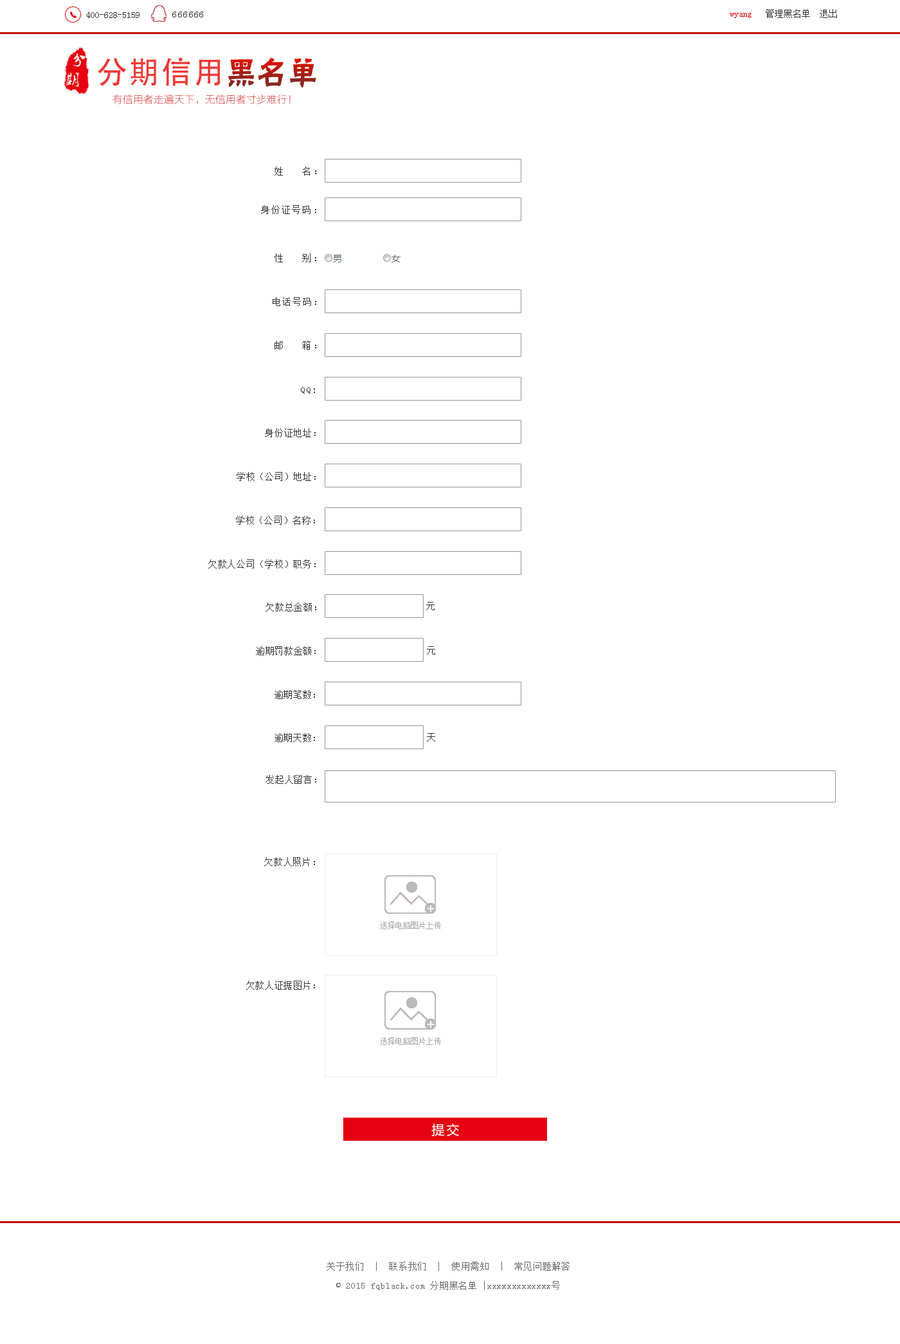
<style>
.page{position:relative;width:900px;height:1344px;background:#ffffff}
.page>*{position:absolute;margin:0}
.t1{font:9px "SimSun";color:#333333}
.t2{font:9px "SimSun";color:#333333;font-weight:bold}
.t3{font:9px "SimSun";letter-spacing:0.1em;color:#333333}
.t4{font:9px "SimSun";color:#d90000}
.t5{font:30.9px "AdobeHeitiStd-Regular";letter-spacing:0.05em;color:#ef3936}
.t6{font:10.3px "FZLTCXHJW--GB1-0";color:#d90000}
.t7{font:9px "SimSun";letter-spacing:0.15em;color:#333333}
.t8{font:9px "SimSun";letter-spacing:0.05em;color:#333333}
.t9{font:12.9px "MicrosoftYaHei";letter-spacing:0.15em;color:#ffffff}
.t10{font:9px/19.3px "SimSun";letter-spacing:0.05em;color:#666666}
</style>
<div class="page">
<p class="t1" style="left:86px;top:12px;width:54px;height:6px"><span class="t2">     </span>400-628-5159</p>
<p class="t3" style="left:172px;top:12px;width:31px;height:5px">666666</p>
<p class="t1" style="left:730px;top:9px;width:107px;height:9px"><span class="t4">wyang   </span>管理黑名单  退出</p>
<p class="t5" style="left:98px;top:57px;width:123px;height:29px">分期信用</p>
<p class="t6" style="left:113px;top:94px;width:178px;height:10px">有信用者走遍天下，无信用者寸步难行！</p>
<p class="t7" style="left:274px;top:166px;width:42px;height:10px">姓   名：</p>
<p class="t7" style="left:261px;top:205px;width:55px;height:9px">身份证号码：</p>
<p class="t7" style="left:274px;top:253px;width:42px;height:9px">性   别：</p>
<p class="t7" style="left:273px;top:297px;width:43px;height:9px">电话号码：</p>
<p class="t7" style="left:274px;top:341px;width:42px;height:9px">邮   箱：</p>
<p class="t7" style="left:301px;top:387px;width:14px;height:6px">QQ:</p>
<p class="t8" style="left:265px;top:428px;width:51px;height:9px">身份证地址：</p>
<p class="t8" style="left:237px;top:472px;width:79px;height:9px">学校（公司）地址：</p>
<p class="t8" style="left:236px;top:516px;width:79px;height:9px">学校（公司）名称：</p>
<p class="t8" style="left:208px;top:559px;width:108px;height:9px">欠款人公司（学校）职务：</p>
<p class="t8" style="left:266px;top:602px;width:50px;height:9px">欠款总金额：</p>
<p class="t8" style="left:426px;top:602px;width:9px;height:8px">元</p>
<p class="t8" style="left:256px;top:646px;width:60px;height:9px">逾期罚款金额：</p>
<p class="t8" style="left:427px;top:646px;width:8px;height:8px">元</p>
<p class="t8" style="left:274px;top:690px;width:41px;height:9px">逾期笔数：</p>
<p class="t8" style="left:274px;top:733px;width:41px;height:9px">逾期天数：</p>
<p class="t8" style="left:427px;top:733px;width:8px;height:8px">天</p>
<p class="t8" style="left:266px;top:775px;width:50px;height:9px">发起人留言：</p>
<p class="t8" style="left:264px;top:857px;width:51px;height:9px">欠款人照片：</p>
<p class="t8" style="left:246px;top:980px;width:69px;height:9px">欠款人证据图片：</p>
<p class="t9" style="left:431px;top:1123px;width:28px;height:13px">提交</p>
<p class="t10" style="left:327px;top:1261px;width:243px;height:29px;text-align:center">关于我们  |  联系我们  |  使用需知  |  常见问题解答<br>© 2015 fqblack.com 分期黑名单 |xxxxxxxxxxxxx号</p>
</div>
